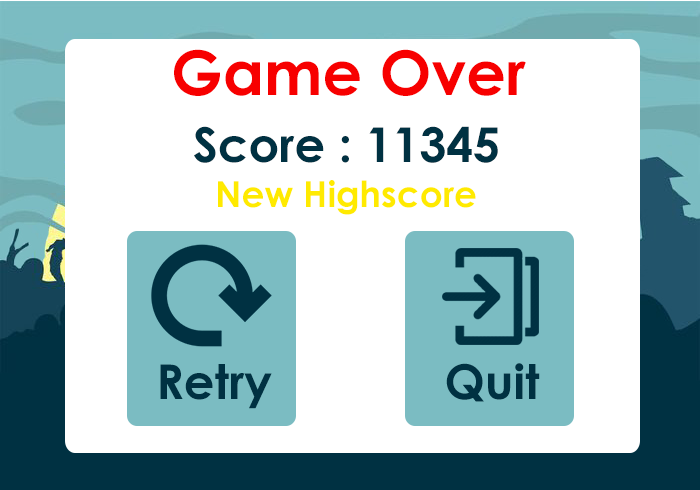
<style>
.page{position:relative;width:700px;height:490px;background:#ffffff}
.page>*{position:absolute;margin:0}
.t1{font:61.8px "CenturyGothic-Bold";color:#f70000}
.t2{font:48px "CenturyGothic-Bold";color:#003142}
.t3{font:36px "CenturyGothic-Bold";color:#ffea00}
</style>
<div class="page">
<p class="t1" style="left:174px;top:49px;width:352px;height:47px">Game Over</p>
<p class="t2" style="left:194px;top:126px;width:304px;height:37px">Score : 11345</p>
<p class="t3" style="left:218px;top:180px;width:258px;height:35px">New Highscore</p>
<p class="t2" style="left:160px;top:364px;width:112px;height:45px">Retry</p>
<p class="t2" style="left:446px;top:363px;width:94px;height:39px">Quit</p>
</div>
